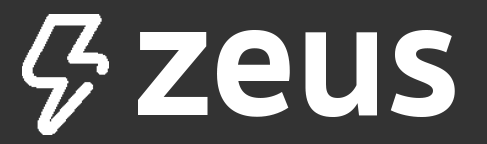
<style>
.page{position:relative;width:487px;height:144px;background:#333333}
.page>*{position:absolute;margin:0}
.t1{font:160px "Tosia-DemiBold";color:#ffffff}
</style>
<div class="page">
<p class="t1" style="left:138px;top:30px;width:317px;height:87px">zeus</p>
</div>
